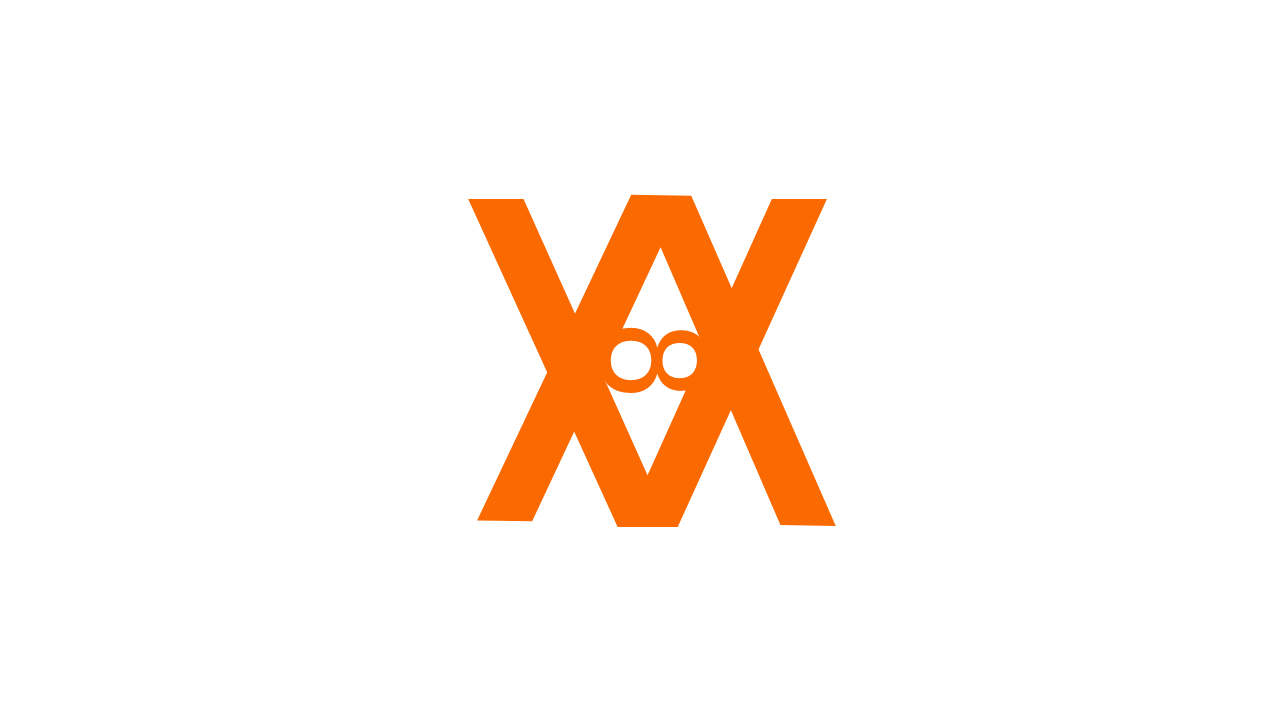
<style>
.page{position:relative;width:1280px;height:720px;background:#ffffff}
.page>*{position:absolute;margin:0}
.t1{font:449.8px "DejaVuSans";color:#fa6a01;scale:1.19 1}
.t2{font:143.6px "DejaVuSans";color:#fa6a01;scale:0.91 1}
</style>
<div class="page">
<p class="t1" style="left:477px;top:194px;width:359px;height:332px;rotate:-179deg">V</p>
<p class="t1" style="left:468px;top:199px;width:359px;height:328px">V</p>
<p class="t2" style="left:599px;top:327px;width:110px;height:67px;rotate:90deg">8</p>
</div>
